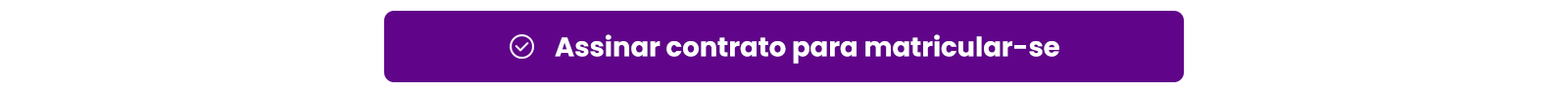
<style>
.page{position:relative;width:1568px;height:93px;background:#ffffff}
.page>*{position:absolute;margin:0}
.t1{font:26.9px "Poppins-Bold";color:#ffffff}
</style>
<div class="page">
<p class="t1" style="left:555px;top:34px;width:504px;height:30px">Assinar contrato para matricular-se</p>
</div>
